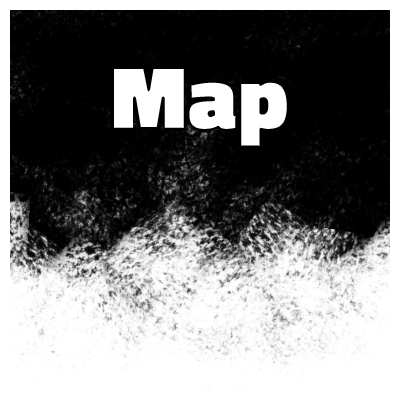
<style>
.page{position:relative;width:400px;height:400px;background:#ffffff}
.page>*{position:absolute;margin:0}
.t1{font:94.6px "TitilliumWeb-Black";color:#ffffff}
.t2{font:90.8px "TitilliumWeb-Black";color:#ffffff}
</style>
<div class="page">
<p class="t1" style="left:107px;top:67px;width:185px;height:80px;rotate:-3deg">Map</p>
<p class="t2" style="left:113px;top:68px;width:175px;height:79px">Map</p>
</div>
